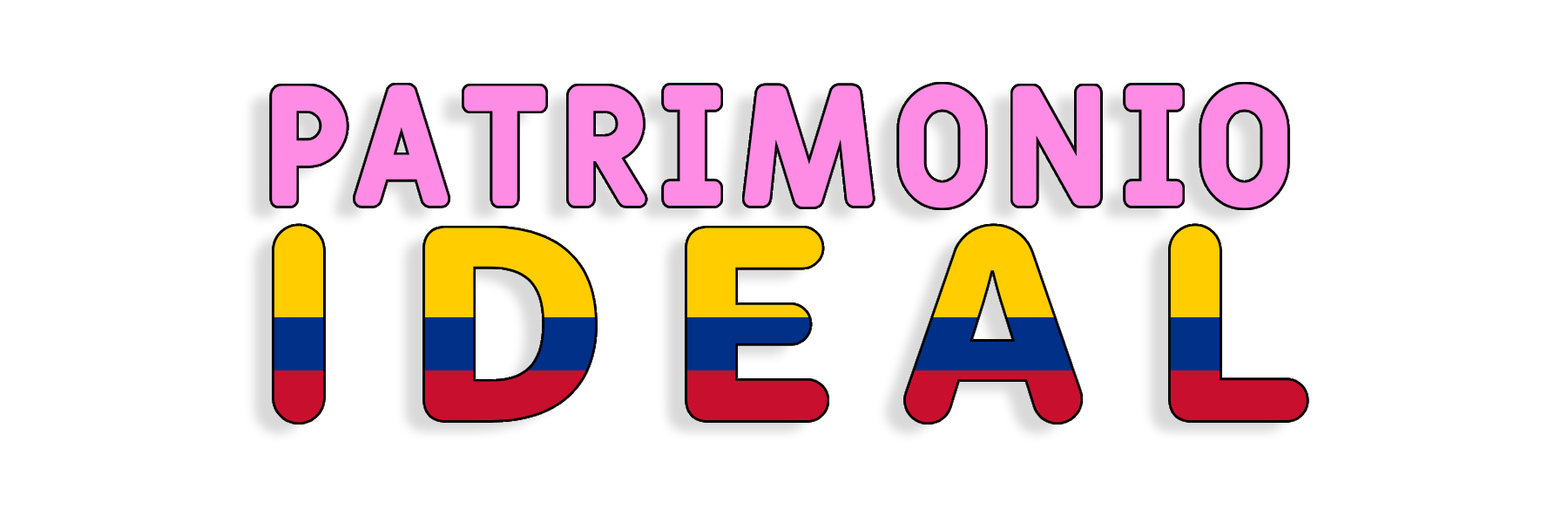
<style>
.page{position:relative;width:1568px;height:523px;background:#ffffff}
.page>*{position:absolute;margin:0}
.t1{font:169.9px "Fulbo-Argenta";color:#ff8ce4}
.t2{font:254.4px "Jellee-Roman"}
</style>
<div class="page">
<p class="t1" style="left:272px;top:84px;width:1016px;height:124px">PATRIMONIO</p>
<p class="t2" style="left:274px;top:226px;width:1033px;height:196px">I D E A L</p>
</div>
